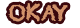
<style>
.page{position:relative;width:80px;height:28px;background:#ffffff}
.page>*{position:absolute;margin:0}
.t1{font:24px "TOBACCO";color:#c4845a;font-weight:bold}
</style>
<div class="page">
<p class="t1" style="left:8px;top:3px;width:60px;height:19px">OKAY</p>
</div>
